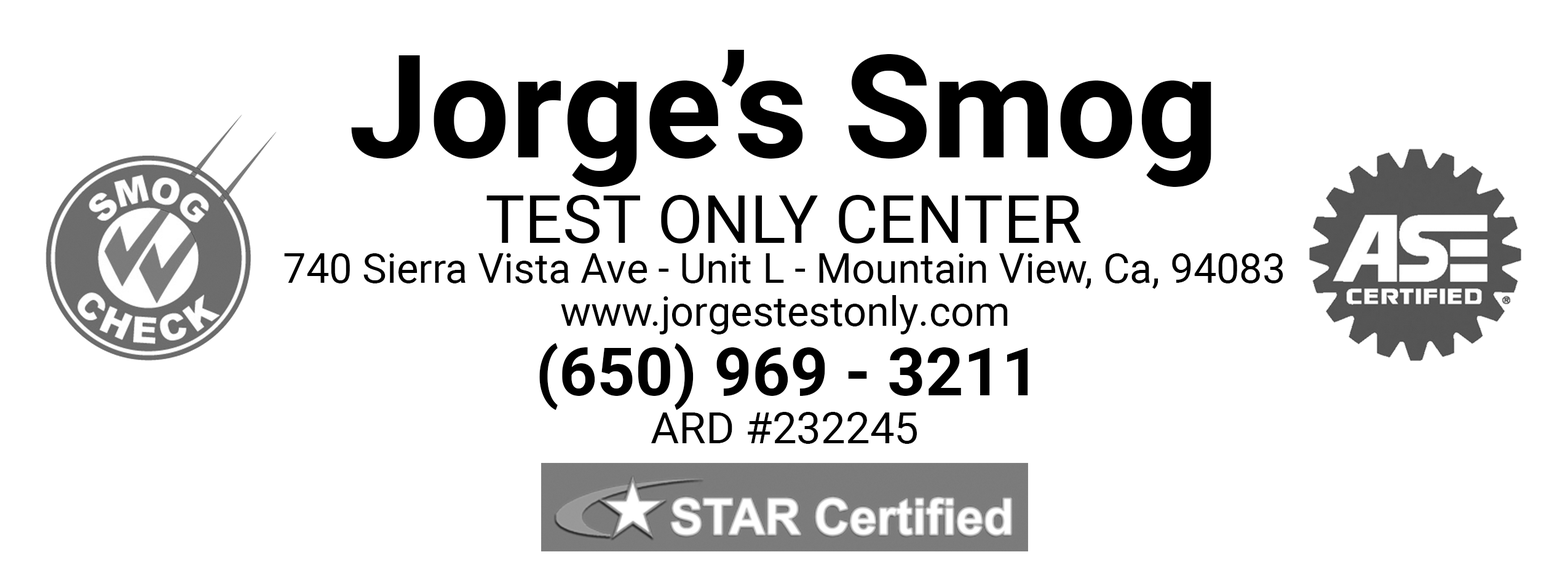
<style>
.page{position:relative;width:1568px;height:584px;background:#ffffff}
.page>*{position:absolute;margin:0}
.t1{font:143.5px "Roboto-Bold";color:#000000}
.t2{font:66.6px "Roboto-Regular";color:#000000}
.t3{font:41px "Roboto-Regular";color:#000000}
.t4{font:66.6px "Roboto-Bold";color:#000000}
.t5{font:43.6px "Roboto-Regular";color:#000000}
</style>
<div class="page">
<p class="t1" style="left:351px;top:50px;width:860px;height:137px">Jorge’s Smog</p>
<p class="t2" style="left:486px;top:195px;width:595px;height:49px">TEST ONLY CENTER</p>
<p class="t3" style="left:284px;top:253px;width:999px;height:36px">740 Sierra Vista Ave - Unit L - Mountain View, Ca, 94083</p>
<p class="t3" style="left:561px;top:295px;width:447px;height:40px">www.jorgestestonly.com</p>
<p class="t4" style="left:539px;top:343px;width:489px;height:67px">(650) 969 - 3211</p>
<p class="t5" style="left:651px;top:412px;width:266px;height:32px">ARD #232245</p>
</div>
